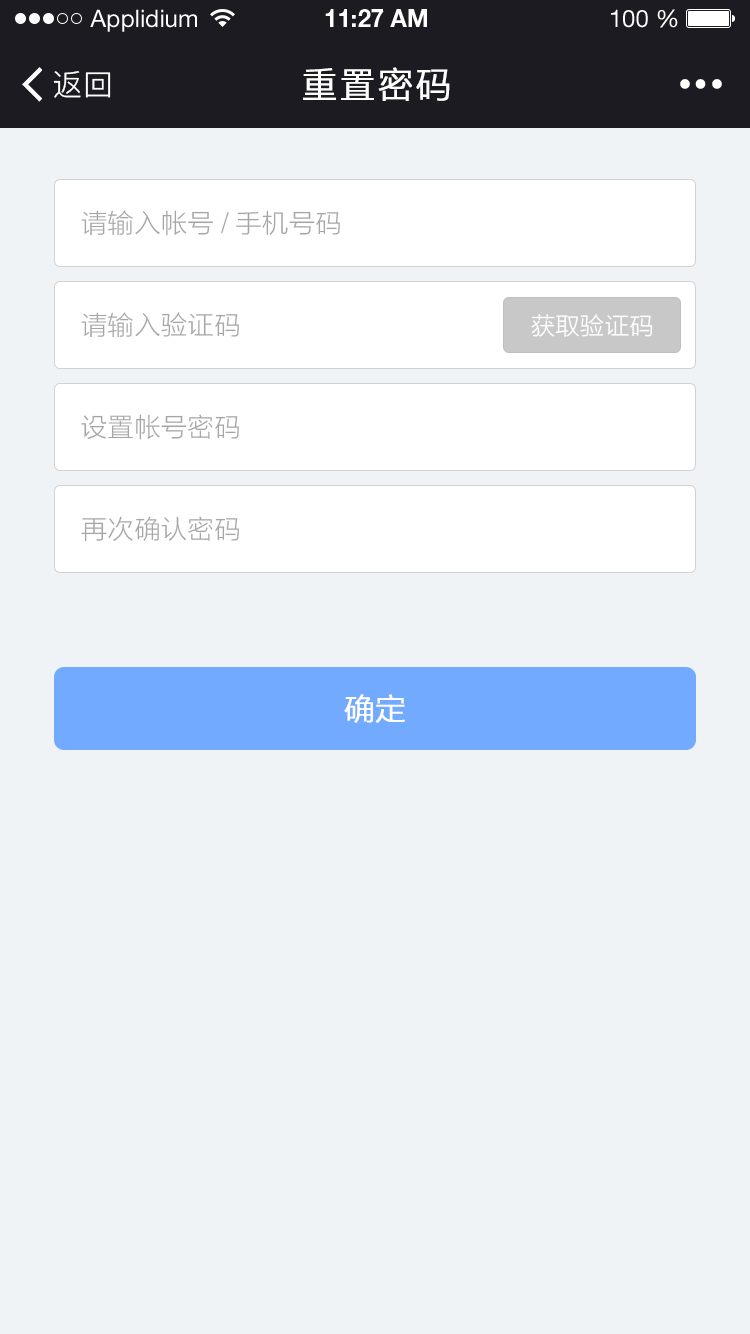
<style>
.page{position:relative;width:750px;height:1334px;background:#eff3f6}
.page>*{position:absolute;margin:0}
.t1{font:24px "HelveticaNeueLTStd-Roman";color:#ffffff}
.t2{font:24px "HelveticaNeueLTStd-Bd";color:#ffffff}
.t3{font:30px "PingFang-SC-Regular";letter-spacing:0.025em;color:#ffffff}
.t4{font:36px "PingFang-SC-Regular";letter-spacing:0.025em;color:#ffffff;font-weight:bold}
.t5{font:26px "FZLTXHK--GBK1-0";letter-spacing:0.025em;color:#a6a6a6}
.t6{font:24px "FZLTXHK--GBK1-0";letter-spacing:0.025em;color:#ffffff}
.t7{font:30px "FZLTXHK--GBK1-0";color:#ffffff;font-weight:bold}
</style>
<div class="page">
<p class="t1" style="left:90px;top:9px;width:107px;height:23px">Applidium</p>
<p class="t2" style="left:325px;top:9px;width:102px;height:18px">11:27 AM</p>
<p class="t1" style="left:611px;top:9px;width:67px;height:19px">100 %</p>
<p class="t3" style="left:53px;top:71px;width:58px;height:27px">返回</p>
<p class="t4" style="left:303px;top:67px;width:147px;height:34px">重置密码</p>
<p class="t5" style="left:81px;top:210px;width:259px;height:26px">请输入帐号/手机号码</p>
<p class="t5" style="left:81px;top:312px;width:158px;height:25px">请输入验证码</p>
<p class="t6" style="left:531px;top:314px;width:122px;height:23px">获取验证码</p>
<p class="t5" style="left:81px;top:414px;width:158px;height:26px">设置帐号密码</p>
<p class="t5" style="left:81px;top:516px;width:158px;height:26px">再次确认密码</p>
<p class="t7" style="left:344px;top:694px;width:61px;height:29px">确定</p>
</div>
